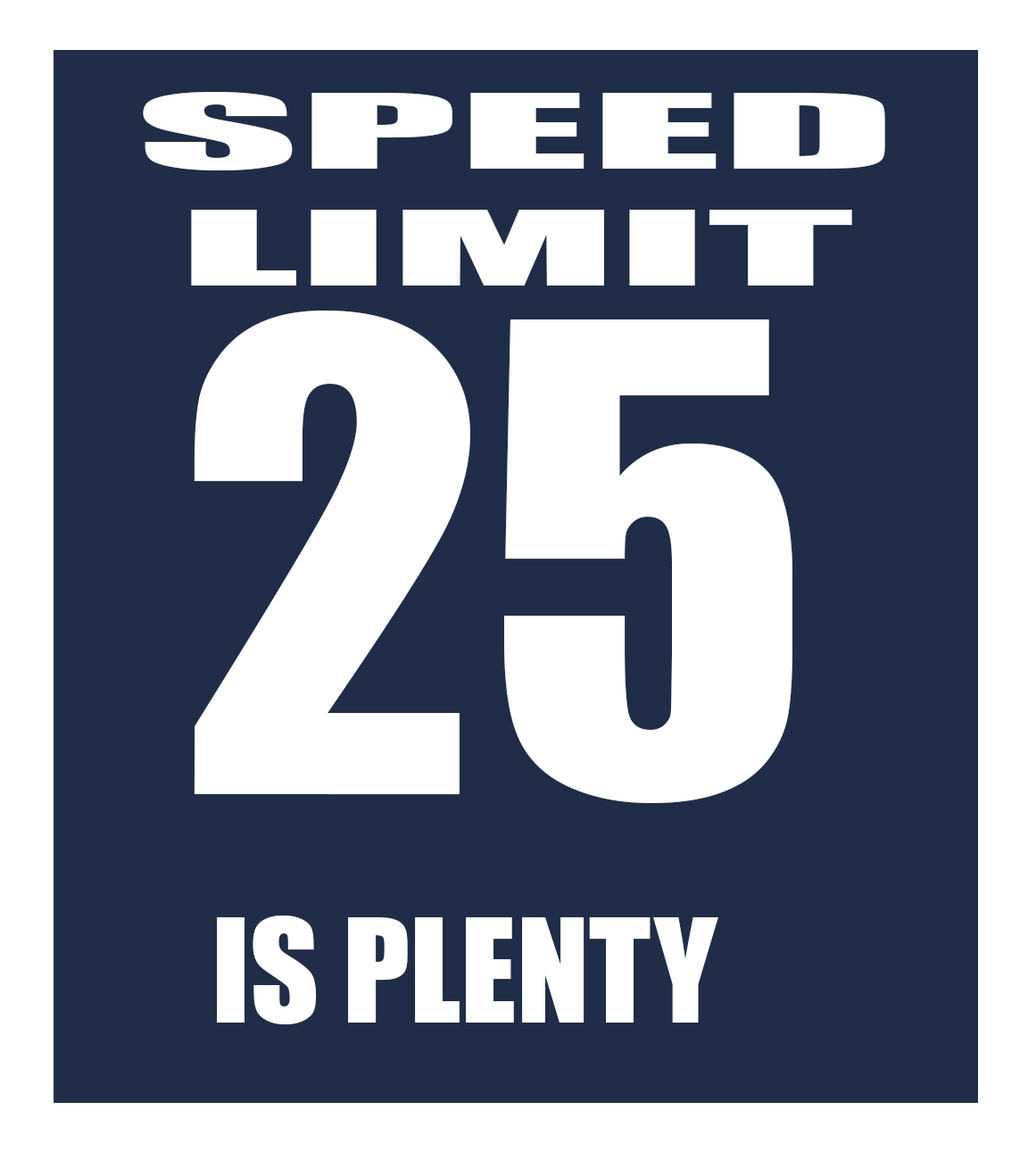
<style>
.page{position:relative;width:1028px;height:1160px;background:#1f2d48}
.page>*{position:absolute;margin:0}
.t1{font:95.9px "Impact";color:#ffffff;scale:3.3 1}
.t2{font:600.5px "Impact";color:#ffffff}
.t3{font:132.5px "Impact";color:#ffffff}
</style>
<div class="page">
<p class="t1" style="left:143px;top:92px;width:742px;height:194px;text-align:center">SPEED<br>LIMIT</p>
<p class="t2" style="left:194px;top:311px;width:598px;height:492px">25</p>
<p class="t3" style="left:217px;top:916px;width:501px;height:108px">IS PLENTY</p>
</div>
